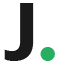
<style>
.page{position:relative;width:64px;height:64px;background:#ffffff}
.page>*{position:absolute;margin:0}
.t1{font:80px "Graphik-Semibold";color:#1a1a1a}
.t2{font:80px "Graphik-Semibold";color:#27ae60}
</style>
<div class="page">
<p class="t1" style="left:4px;top:3px;width:51px;height:58px">J<span class="t2">.</span></p>
</div>
